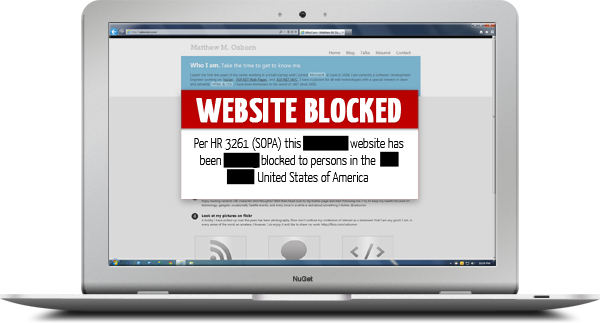
<style>
.page{position:relative;width:600px;height:323px;background:#ffffff}
.page>*{position:absolute;margin:0}
.t1{font:34px "YanoneKaffeesatz-Bold";color:#ffffff;font-weight:bold;scale:1.1 1}
.t2{font:14.2px/17px "YanoneKaffeesatz-Thin";color:#000000}
.t3{font:6.6px "Helvetica";color:#3c3c3b;font-weight:bold}
</style>
<div class="page">
<p class="t1" style="left:196px;top:98px;width:205px;height:25px">WEBSITE BLOCKED</p>
<p class="t2" style="left:194px;top:137px;width:210px;height:45px;text-align:center">Per HR 3261 (SOPA) this Awesome website has been Fucking blocked to persons in the  God Damn United States of America</p>
<p class="t3" style="left:293px;top:276px;width:20px;height:6px">NuGet</p>
</div>
